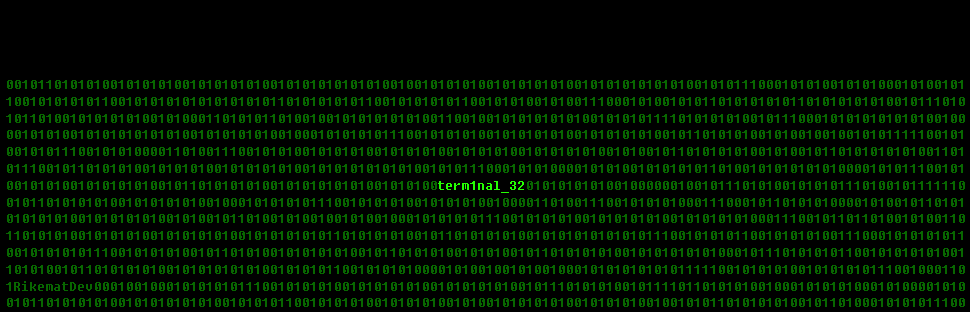
<style>
.page{position:relative;width:970px;height:312px;background:#000000}
.page>*{position:absolute;margin:0}
.t1{font:14px "Fixedsys";color:#086700}
.t2{font:14px "Fixedsys";color:#24ff02}
</style>
<div class="page">
<p class="t1" style="left:6px;top:80px;width:959px;height:227px">001011010101001010101001010101010010101010101010010010101010010101010100101010101010100101011100010101001010100010100101<br>100101010101100101010101010101010110101010101100101010101100101010010100111000101001010110101010101101010101010010111010<br>101101001010101010010100011010101101001001010101010100110010010101010101001010101111010101010010111000101010101010100100<br>001010100101010101010100101010101001000101010101110010101010010101010100101010101001011010101001010010010010101111100101<br>001010111001010100001101001110010101001010101001010101001010101001010101010010100101101010101001010010110101010101001101<br>011100101101010100101010100101010101001010101010101001010111000101010000101010010101010110100101010101010000101011100101<br>001010100101010101001011010101010010101010101001010100term1nal_320101010101001000000100101110101001010101110100101111110<br>010110101010100101010101001000101010101110010101010010101010010000110100111001010101000111000101101010100001010010110101<br>010101010010101010100101001011010010100100101001000101010101110010101010010101010100101010101000111001011011010010100110<br>110101010010101010010101010100101010101011010101010010110101010100101010101010101110010101011001010101001110001010101011<br>001010101011100101010100101101010010101010100101101010100101010010110101010100101010101010001011101010101100101010101001<br>101010010110101010100101010101010010101011001010101000010100100101001000101010101010111110010101010010101010111001000110<br>1RikematDev0001001000101010101110010101010010101010100101010101001011101010100101111011010101001000101010100010100001010<br>010110101010100101010101010010101011001010101001010101001010010101010100101010100100101011010101010010110100010101011100</p>
<p class="t2" style="left:438px;top:181px;width:86px;height:12px">term1nal_32</p>
</div>
